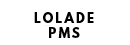
<style>
.page{position:relative;width:130px;height:45px;background:#ffffff}
.page>*{position:absolute;margin:0}
.t1{font:12.2px "LeagueSpartan-Bold";letter-spacing:0.16em;color:#000000}
</style>
<div class="page">
<p class="t1" style="left:34px;top:12px;width:60px;height:26px;text-align:center">LOLADE<br>PMS</p>
</div>
